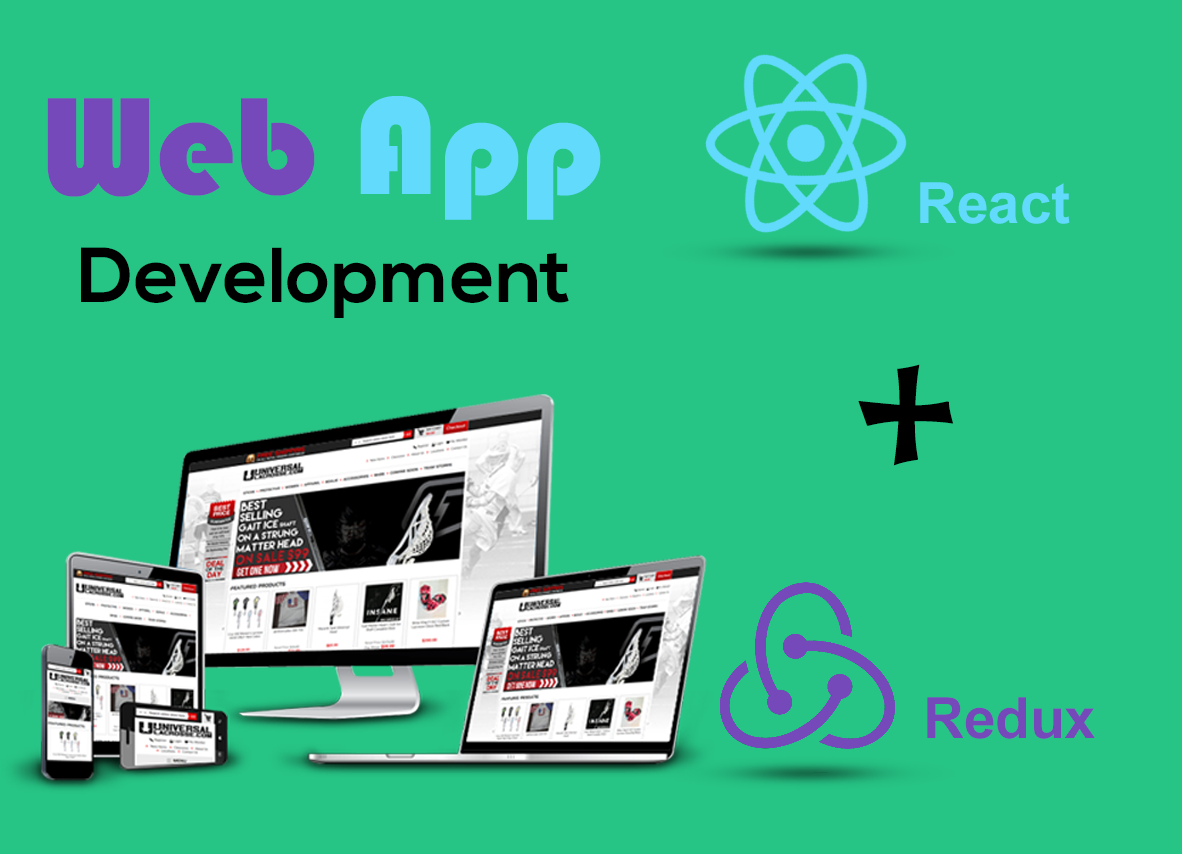
<style>
.page{position:relative;width:1182px;height:854px;background:#26c485}
.page>*{position:absolute;margin:0}
.t1{font:143.6px "Bauhaus93";color:#7649bb}
.t2{font:143.6px "Bauhaus93";color:#61dafb}
.t3{font:56.7px "Arial-BoldMT";color:#61dafb}
.t4{font:77.7px "NexaBold";color:#000000}
.t5{font:156.6px "Ravie";color:#000000}
.t6{font:56.7px "Arial-BoldMT";color:#7649bb}
</style>
<div class="page">
<p class="t1" style="left:47px;top:96px;width:554px;height:124px">Web <span class="t2">App</span></p>
<p class="t3" style="left:920px;top:182px;width:150px;height:42px">React</p>
<p class="t4" style="left:81px;top:247px;width:488px;height:71px">Development</p>
<p class="t5" style="left:858px;top:364px;width:96px;height:102px">+</p>
<p class="t6" style="left:927px;top:697px;width:168px;height:42px">Redux</p>
</div>
